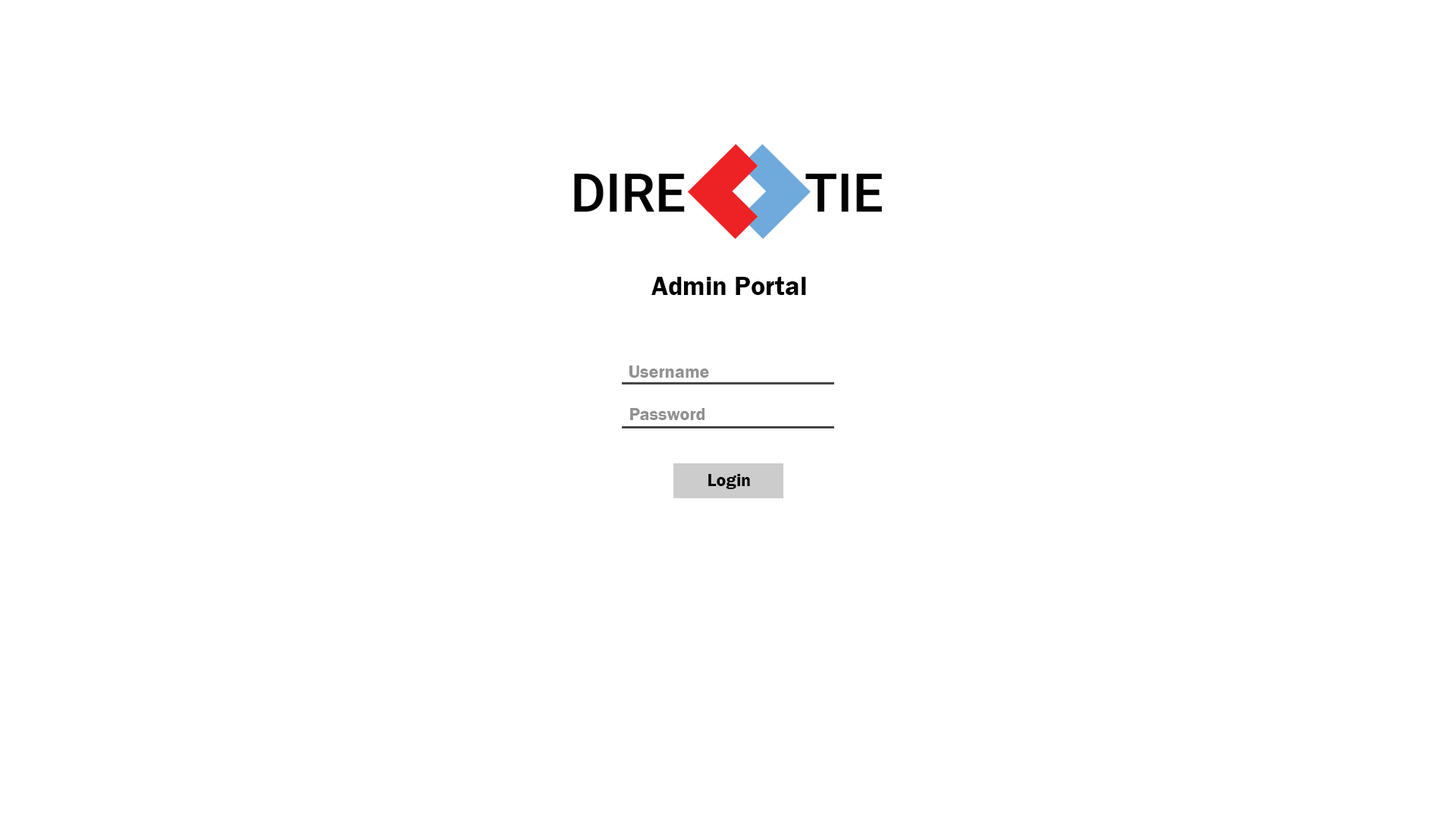
<style>
.page{position:relative;width:1456px;height:819px;background:#ffffff}
.page>*{position:absolute;margin:0}
.t1{font:27.3px "FranklinGothic-Demi";color:#000000}
.t2{font:18.2px "FranklinGothic-Demi";color:#919191}
</style>
<div class="page">
<p class="t1" style="left:651px;top:277px;width:155px;height:18px">Admin Portal</p>
<p class="t2" style="left:629px;top:366px;width:80px;height:12px">Username</p>
<p class="t2" style="left:630px;top:408px;width:74px;height:12px">Password</p>
</div>
